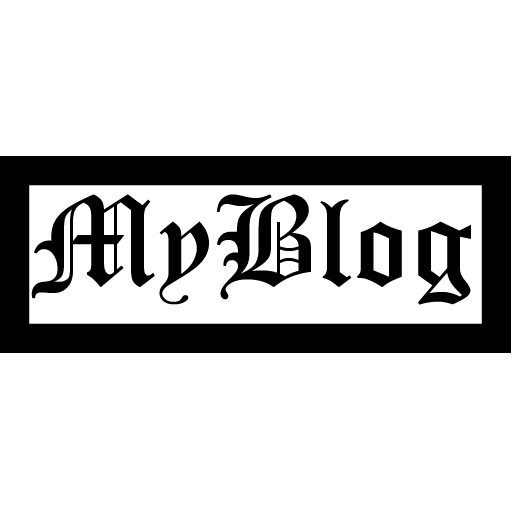
<style>
.page{position:relative;width:512px;height:512px;background:#ffffff}
.page>*{position:absolute;margin:0}
.t1{font:125px "OldEnglishTextMT";color:#000000}
</style>
<div class="page">
<p class="t1" style="left:31px;top:194px;width:440px;height:111px">MyBlog</p>
</div>
